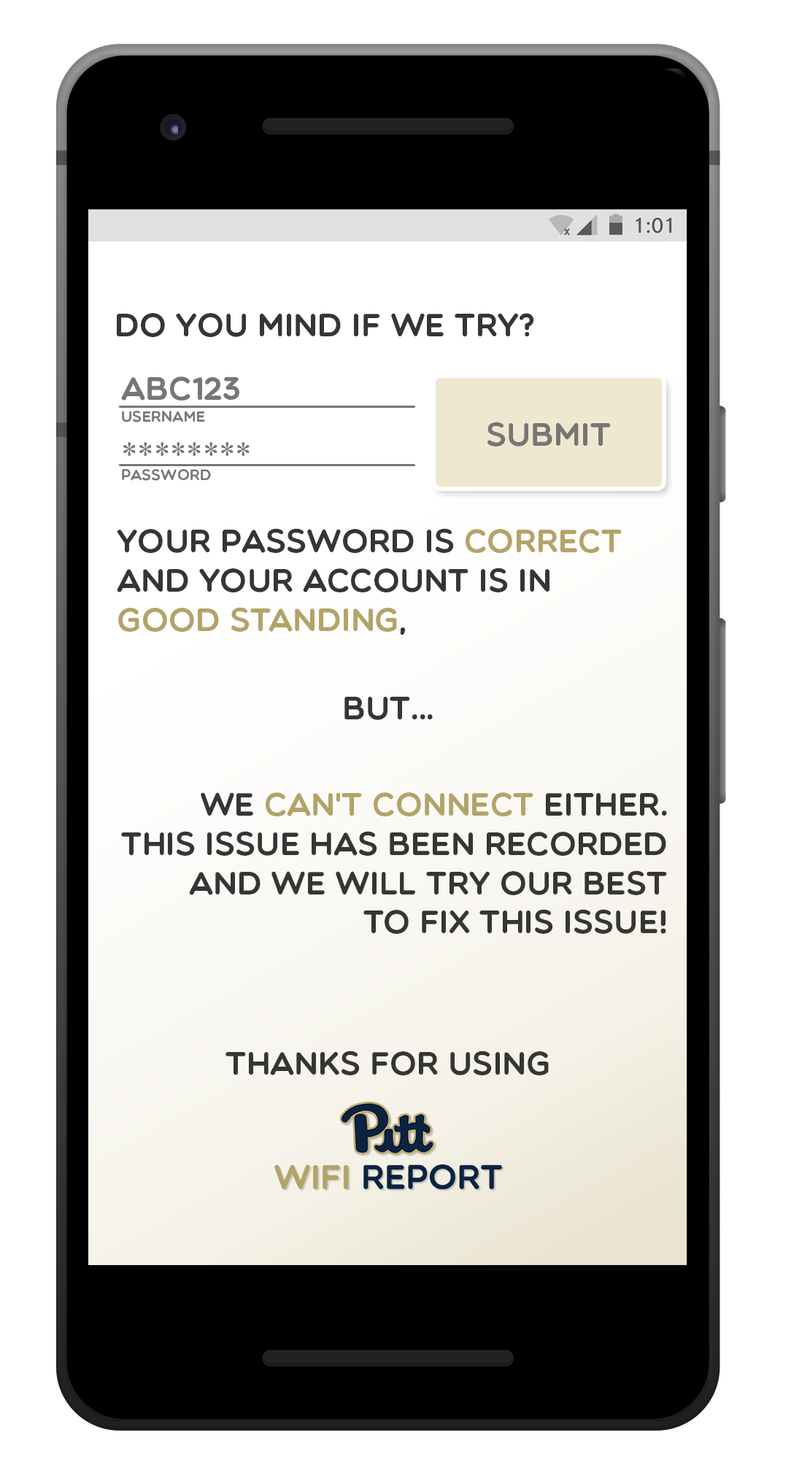
<style>
.page{position:relative;width:810px;height:1473px;background:#ffffff}
.page>*{position:absolute;margin:0}
.t1{font:10.7px "KeepCalm-Medium";color:#5a5a5a}
.t2{font:32.6px "Multicolore";color:#353534}
.t3{font:32.6px "Multicolore";color:#767675}
.t4{font:15.1px "Multicolore";color:#767675}
.t5{font:32.6px "TimesNewRomanPSMT";color:#767675}
.t6{font:32.6px "Multicolore";color:#b3a369}
</style>
<div class="page">
<p class="t1" style="left:563px;top:228px;width:7px;height:8px">x</p>
<p class="t2" style="left:117px;top:313px;width:417px;height:24px">Do you mind if we try?</p>
<p class="t3" style="left:121px;top:376px;width:118px;height:24px">abc123</p>
<p class="t4" style="left:122px;top:411px;width:83px;height:11px">(Username)</p>
<p class="t3" style="left:487px;top:422px;width:124px;height:24px">Submit</p>
<p class="t5" style="left:123px;top:442px;width:126px;height:14px">********</p>
<p class="t4" style="left:122px;top:469px;width:89px;height:12px">(Password)</p>
<p class="t2" style="left:117px;top:528px;width:504px;height:107px">Your Password is <span class="t6">correct<br></span>And your account is in<br><span class="t6">Good Standing</span>,</p>
<p class="t2" style="left:344px;top:697px;width:89px;height:23px">But...</p>
<p class="t2" style="left:121px;top:792px;width:546px;height:142px;text-align:right">We <span class="t6">Can't Connect</span> either.<br>This issue has been recorded<br>and we will try our best<br>to fix this issue!</p>
<p class="t2" style="left:225px;top:1050px;width:324px;height:25px">Thanks for using</p>
</div>
